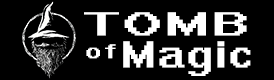
<style>
.page{position:relative;width:274px;height:80px;background:#000000}
.page>*{position:absolute;margin:0}
.t1{font:30.4px "System";color:#ffffff;text-transform:uppercase;font-weight:bold;scale:1.76 1}
.t2{font:34.2px "System";letter-spacing:0.06em;color:#ffffff;font-weight:bold;scale:1.22 1}
.t3{font:18.4px "System";letter-spacing:0.16em;color:#ffffff;font-weight:bold;scale:1.4 1}
</style>
<div class="page">
<p class="t1" style="left:84px;top:12px;width:163px;height:24px">Tomb</p>
<p class="t2" style="left:123px;top:41px;width:128px;height:35px">Magic</p>
<p class="t3" style="left:86px;top:44px;width:30px;height:15px">of</p>
</div>
